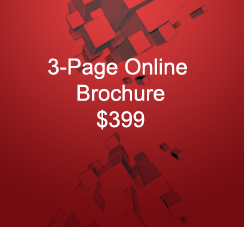
<style>
.page{position:relative;width:244px;height:227px}
.page>*{position:absolute;margin:0}
.t1{font:22px "ArialMT";color:#ffffff}
</style>
<div class="page">
<p class="t1" style="left:48px;top:58px;width:139px;height:72px;text-align:center">3-Page Online <br>Brochure<br>$399</p>
</div>
